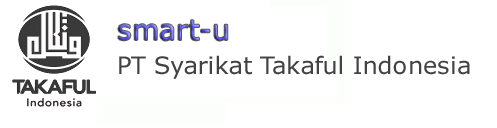
<style>
.page{position:relative;width:497px;height:128px;background:#ffffff}
.page>*{position:absolute;margin:0}
.t1{font:28px "Verdana";letter-spacing:0.005em}
.t2{font:24px "Verdana";letter-spacing:0.005em;color:#424242}
</style>
<div class="page">
<p class="t1" style="left:118px;top:20px;width:110px;height:21px">smart-u</p>
<p class="t2" style="left:119px;top:55px;width:351px;height:24px">PT Syarikat Takaful Indonesia</p>
</div>
